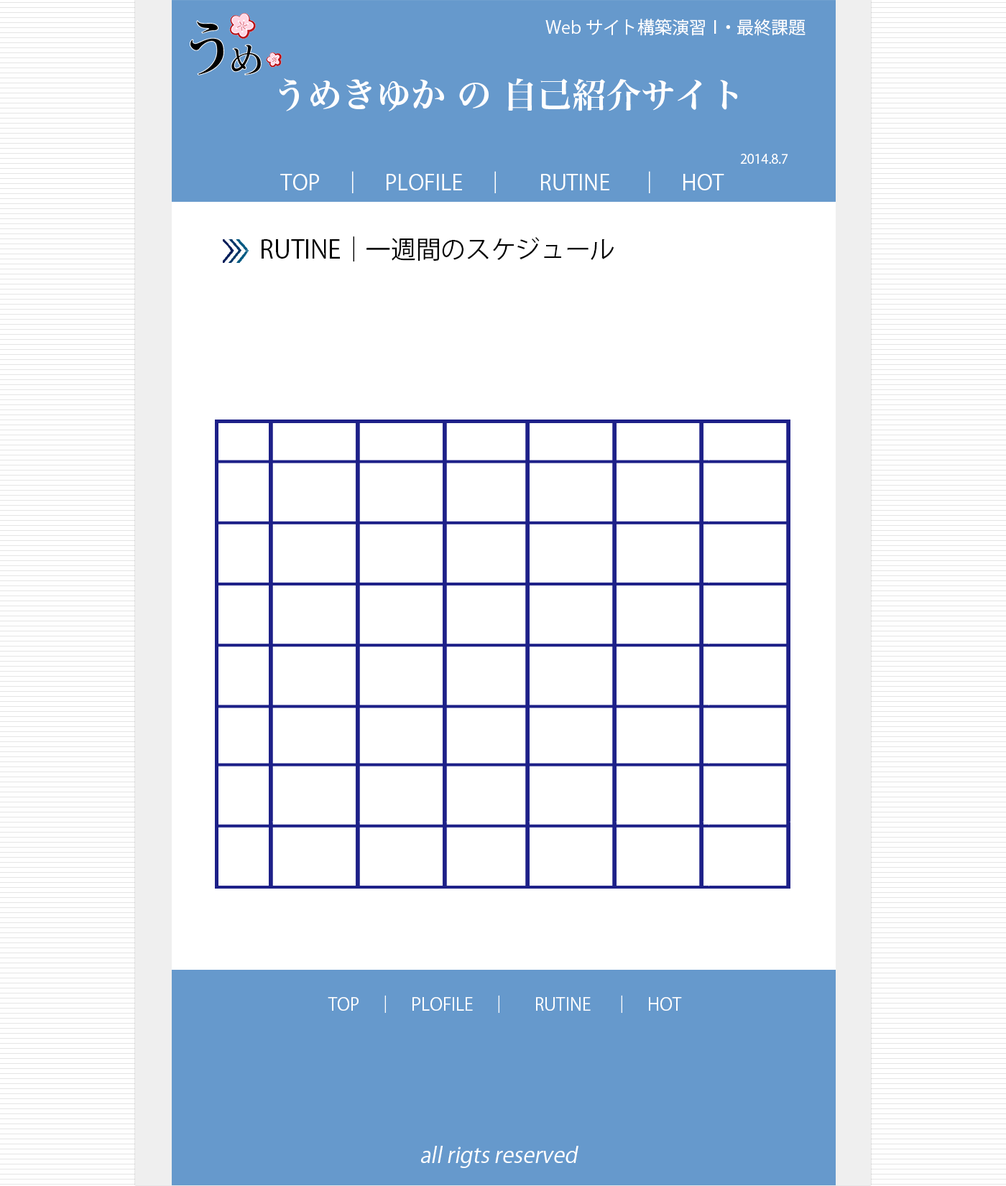
<style>
.page{position:relative;width:1006px;height:1186px;background:#ffffff}
.page>*{position:absolute;margin:0}
.t1{font:17.2px "KozGoPr6N-Regular";color:#ffffff}
.t2{font:34.5px "HiraMinProN-W6";color:#ffffff}
.t3{font:12.9px "KozGoPr6N-Regular";color:#ffffff}
.t4{font:21.5px "KozGoPr6N-Regular";color:#ffffff}
.t5{font:24.9px "KozGoPr6N-Regular";color:#000000}
.t6{font:21.5px "KozGoPr6N-Regular";color:#ffffff;font-style:italic}
</style>
<div class="page">
<p class="t1" style="left:545px;top:19px;width:260px;height:17px">Webサイト構築演習Ⅰ・最終課題</p>
<p class="t2" style="left:279px;top:78px;width:459px;height:33px">うめきゆか の 自己紹介サイト</p>
<p class="t3" style="left:740px;top:154px;width:48px;height:10px">2014.8.7</p>
<p class="t4" style="left:280px;top:171px;width:444px;height:22px">TOP　│　PLOFILE　│　 RUTINE 　│　HOT</p>
<p class="t5" style="left:261px;top:236px;width:353px;height:25px">RUTINE│一週間のスケジュール</p>
<p class="t1" style="left:328px;top:995px;width:354px;height:18px">TOP　│　PLOFILE　│　 RUTINE 　│　HOT</p>
<p class="t6" style="left:421px;top:1146px;width:157px;height:22px">all rigts reserved</p>
</div>
